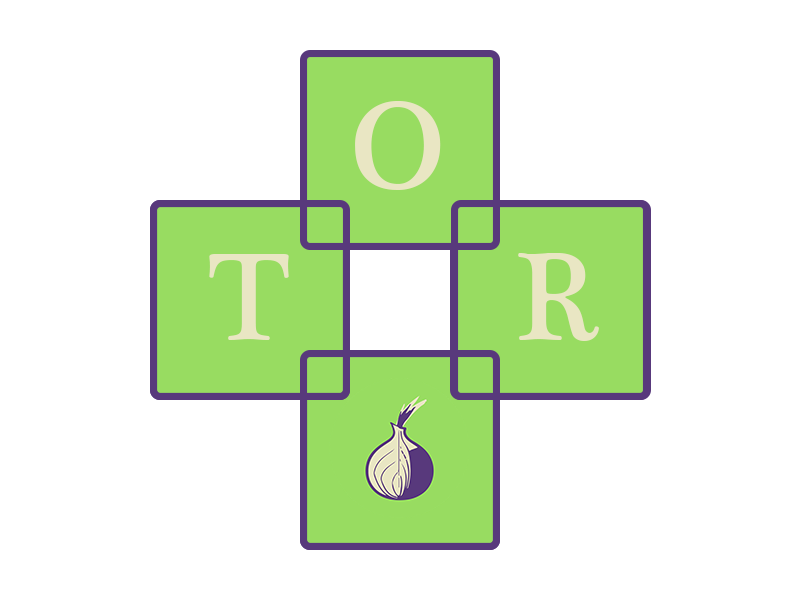
<style>
.page{position:relative;width:800px;height:600px;background:#ffffff}
.page>*{position:absolute;margin:0}
.t1{font:127px "PlantagenetCherokee";color:#e9e6c3}
</style>
<div class="page">
<p class="t1" style="left:355px;top:101px;width:86px;height:89px">O</p>
<p class="t1" style="left:209px;top:254px;width:80px;height:86px">T</p>
<p class="t1" style="left:518px;top:253px;width:81px;height:88px">R</p>
</div>
